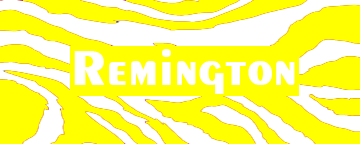
<style>
.page{position:relative;width:360px;height:144px;background:#ffff00}
.page>*{position:absolute;margin:0}
.t1{font:50px "Exotic350BT-Bold";color:#ffffff;font-weight:bold}
.t2{font:50px "Exotic350BT-Bold";color:#0000ff;font-weight:bold}
</style>
<div class="page">
<p class="t1" style="left:74px;top:49px;width:221px;height:45px"><span class="t2"> </span>  Remington</p>
</div>
